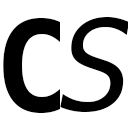
<style>
.page{position:relative;width:128px;height:128px;background:#ffffff}
.page>*{position:absolute;margin:0}
.t1{font:125px "Menlo-Italic";color:#000000}
.t2{font:125px "Menlo-Bold";color:#000000}
</style>
<div class="page">
<p class="t1" style="left:60px;top:17px;width:70px;height:95px">S</p>
<p class="t2" style="left:3px;top:18px;width:57px;height:95px">C</p>
</div>
